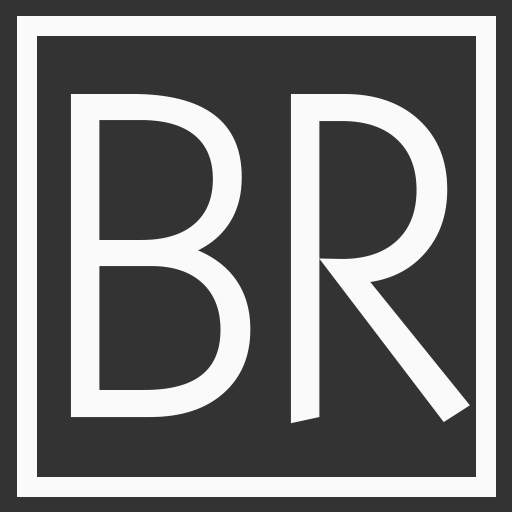
<style>
.page{position:relative;width:512px;height:512px;background:#333333}
.page>*{position:absolute;margin:0}
.t1{font:472px "KabelITCbyBT-Book";color:#fafafa}
</style>
<div class="page">
<p class="t1" style="left:70px;top:94px;width:400px;height:330px">BR</p>
</div>
